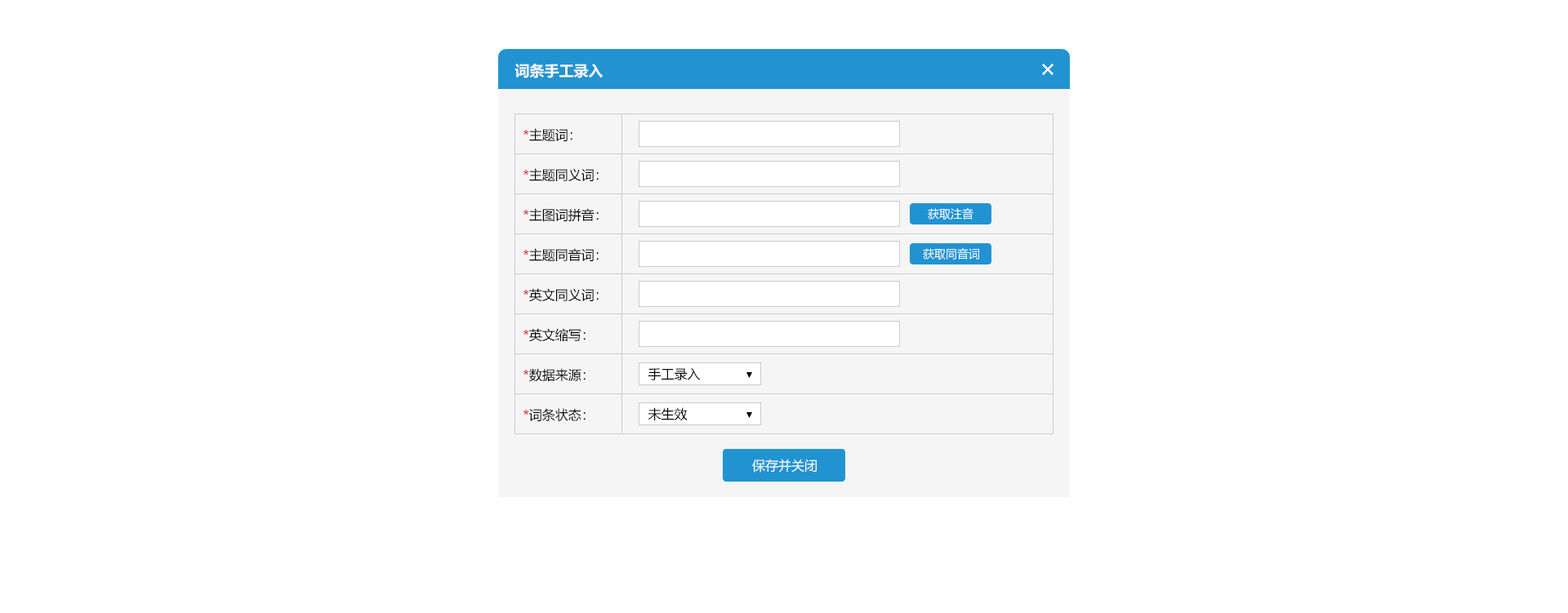
<style>
.page{position:relative;width:1568px;height:613px;background:#ffffff}
.page>*{position:absolute;margin:0}
.t1{font:14.7px "MicrosoftYaHei-Bold";color:#f5f5f5}
.t2{font:13.1px/40px "MicrosoftYaHei";color:#000000}
.t3{font:13.1px/40px "MicrosoftYaHei";color:#cc0000}
.t4{font:11.4px "MicrosoftYaHei";color:#fffefe}
.t5{font:13.1px "MicrosoftYaHei";color:#000000}
.t6{font:13.1px "MicrosoftYaHei";color:#fffefe}
</style>
<div class="page">
<p class="t1" style="left:514px;top:64px;width:90px;height:14px">词条手工录入</p>
<p class="t2" style="left:523px;top:128px;width:76px;height:293px"><span class="t3">*</span>主题词：<br><span class="t3">*</span>主题同义词：<br><span class="t3">*</span>主图词拼音：<br><span class="t3">*</span>主题同音词：<br><span class="t3">*</span>英文同义词：<br><span class="t3">*</span>英文缩写：<br><span class="t3">*</span>数据来源：<br><span class="t3">*</span>词条状态：</p>
<p class="t4" style="left:928px;top:208px;width:45px;height:12px">获取注音</p>
<p class="t4" style="left:923px;top:248px;width:56px;height:12px">获取同音词</p>
<p class="t5" style="left:648px;top:368px;width:53px;height:13px">手工录入</p>
<p class="t5" style="left:648px;top:408px;width:40px;height:13px">未生效</p>
<p class="t6" style="left:752px;top:459px;width:65px;height:14px">保存并关闭</p>
</div>
